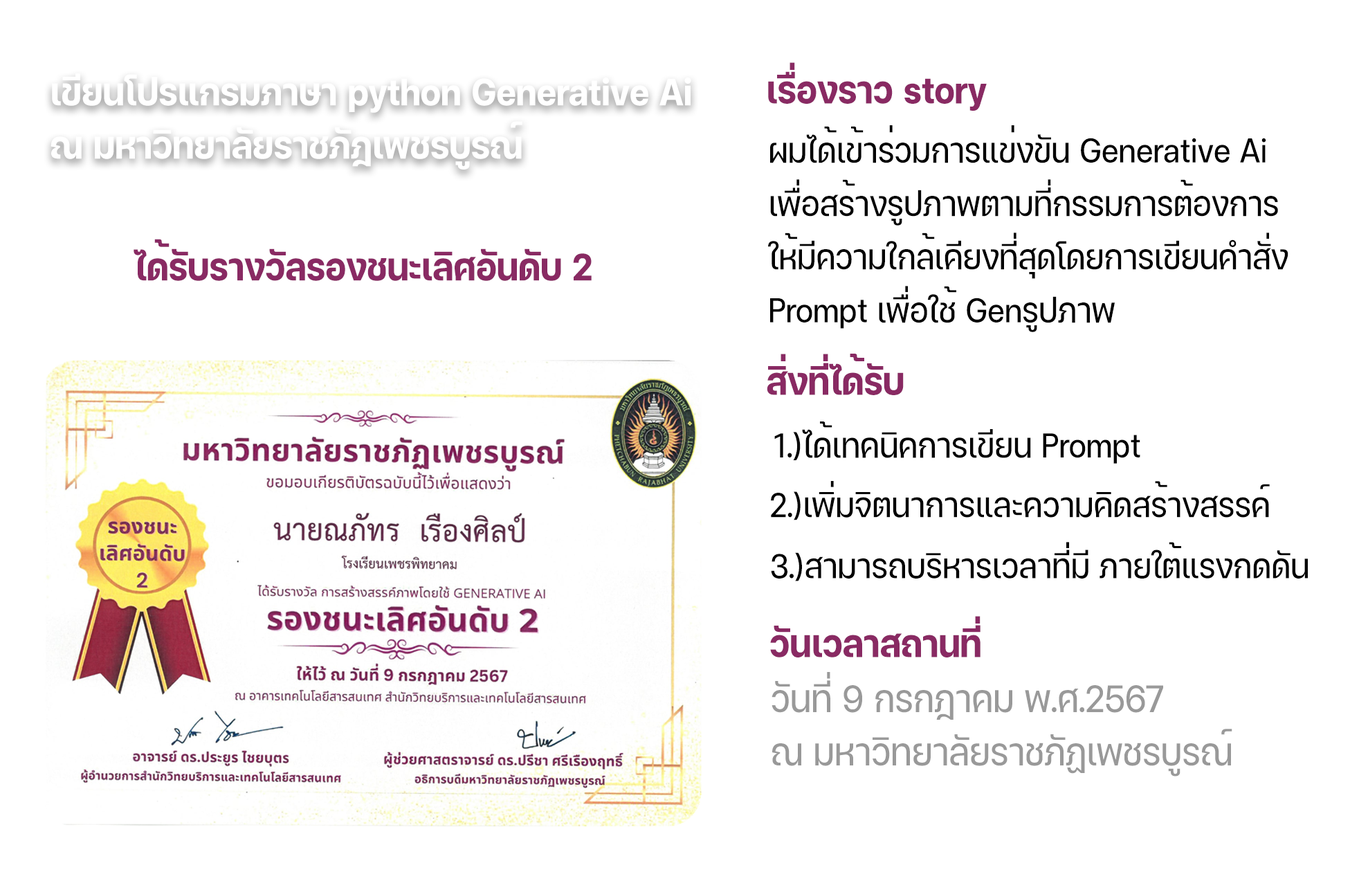
<style>
.page{position:relative;width:1368px;height:872px;background:#ffffff}
.page>*{position:absolute;margin:0}
.t1{font:38.1px "FCSubjectNoncommercial-Bold";color:#892a63;scale:0.91 1}
.t2{font:34.2px/53.3px "FCSubjectNoncommercial-Reg";color:#000000;scale:0.91 1}
.t3{font:34.2px "FCSubjectNoncommercial-Reg";color:#000000;scale:0.91 1}
.t4{font:38.1px/53.3px "FCSubjectNoncommercial-Reg";color:#999999;scale:0.91 1}
</style>
<div class="page">
<p class="t1" style="left:768px;top:62px;width:219px;height:49px">เรื่องราว story</p>
<p class="t2" style="left:768px;top:125px;width:520px;height:207px;text-align:right">ผมได้เข้าร่วมการแข่งขัน Generative Ai <br>เพื่อสร้างรูปภาพตามที่กรรมการต้องการ<br>ให้มีความใกล้เคียงที่สุดโดยการเขียนคำสั่ง<br>Prompt เพื่อใช้ Genรูปภาพ</p>
<p class="t1" style="left:134px;top:239px;width:458px;height:42px">ได้รับรางวัลรองชนะเลิศอันดับ 2</p>
<p class="t1" style="left:767px;top:354px;width:137px;height:41px">สิ่งที่ได้รับ</p>
<p class="t3" style="left:774px;top:421px;width:366px;height:43px">1.)ได้เทคนิคการเขียน Prompt</p>
<p class="t3" style="left:771px;top:481px;width:499px;height:39px">2.)เพิ่มจิตนาการและความคิดสร้างสรรค์</p>
<p class="t3" style="left:771px;top:542px;width:537px;height:39px">3.)สามารถบริหารเวลาที่มี ภายใต้แรงกดดัน</p>
<p class="t1" style="left:770px;top:616px;width:210px;height:41px">วันเวลาสถานที่</p>
<p class="t4" style="left:771px;top:672px;width:461px;height:104px;text-align:right">วันที่ 9 กรกฎาคม พ.ศ.2567<br>ณ มหาวิทยาลัยราชภัฏเพชรบูรณ์</p>
</div>
